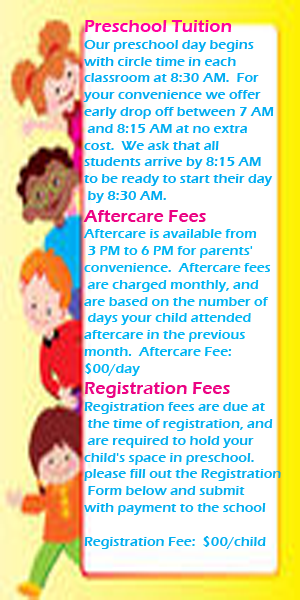
<style>
.page{position:relative;width:300px;height:600px;background:#ffffff}
.page>*{position:absolute;margin:0}
.t1{font:14px "ErasITC-Demi";color:#00acf1}
.t2{font:18px "ErasITC-Demi";color:#ff009c}
.t3{font:18px "ErasITC-Demi";color:#eb0383}
.t4{font:14px "ErasITC-Demi";color:#00b5f3}
.t5{font:14px "ErasITC-Demi";color:#03afef}
</style>
<div class="page">
<p class="t1" style="left:83px;top:20px;width:198px;height:529px"><span class="t2">Preschool Tuition <br></span>Our preschool day begins <br>with circle time in each <br>classroom at 8:30 AM.  For <br>your convenience we offer <br>early drop off between 7 AM<br> and 8:15 AM at no extra <br>cost.  We ask that all <br>students arrive by 8:15 AM <br>to be ready to start their day<br> by 8:30 AM.<br><span class="t3">Aftercare Fees<br></span><span class="t4">Aftercare is available from<br> 3 PM to 6 PM for parents' <br>convenience.  Aftercare fees<br> are charged monthly, and <br>are based on the number of<br> days your child attended <br>aftercare in the previous <br>month.  Aftercare Fee:  <br>$00/day<br></span><span class="t3">Registration Fees<br></span><span class="t5">Registration fees are due at<br> the time of registration, and<br> are required to hold your <br>child's space in preschool.<br>please fill out the Registration<br> Form below and submit <br>with payment to the school<br><br>Registration Fee:  $00/child</span></p>
</div>
